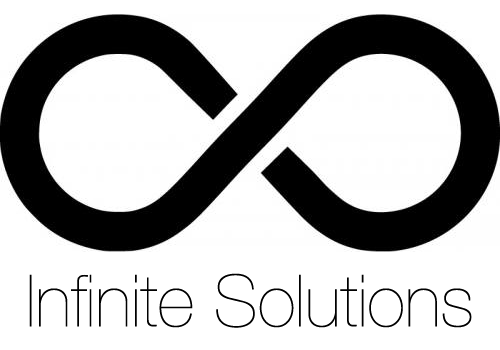
<style>
.page{position:relative;width:500px;height:350px;background:#ffffff}
.page>*{position:absolute;margin:0}
.t1{font:72px "HelveticaNeue-UltraLight";color:#000000}
</style>
<div class="page">
<p class="t1" style="left:29px;top:273px;width:443px;height:55px">Infinite Solutions</p>
</div>
